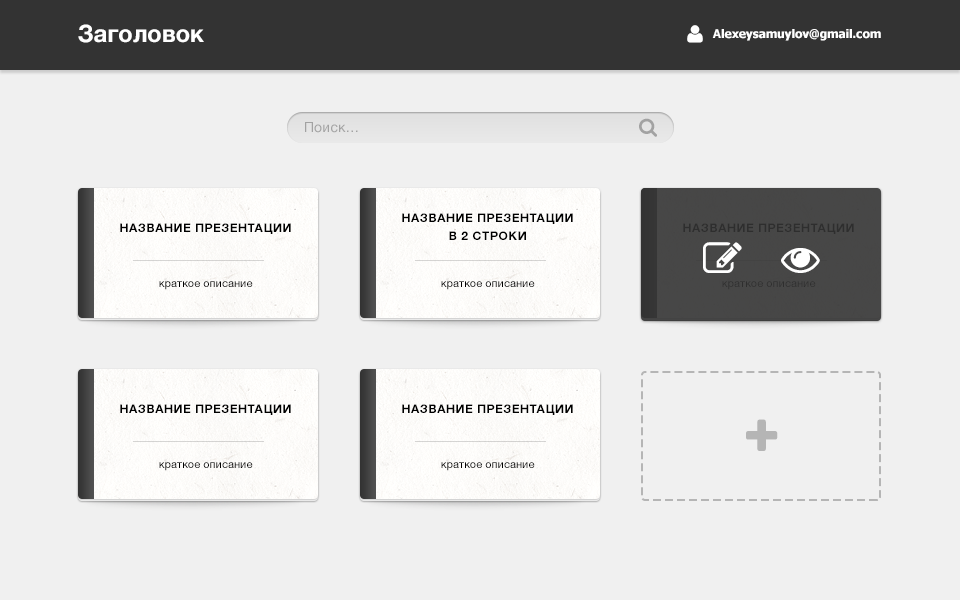
<style>
.page{position:relative;width:960px;height:600px;background:#f0f0f0}
.page>*{position:absolute;margin:0}
.t1{font:24px "HelveticaNeue-Bold";color:#ffffff}
.t2{font:12px "Tahoma-Bold";color:#ffffff}
.t3{font:14px "HelveticaNeue";color:#a2a2a2}
.t4{font:12px/18px "HelveticaNeue-Bold";letter-spacing:0.05em;color:#000000;text-transform:uppercase}
.t5{font:12px "HelveticaNeue-Bold";letter-spacing:0.05em;color:#000000;text-transform:uppercase}
.t6{font:12px "HelveticaNeue-Bold";letter-spacing:0.05em;color:#2e2e2e;text-transform:uppercase}
.t7{font:11px "HelveticaNeue";color:#000000}
.t8{font:11px "HelveticaNeue";color:#2e2e2e}
</style>
<div class="page">
<p class="t1" style="left:78px;top:24px;width:126px;height:19px">Заголовок</p>
<p class="t2" style="left:712px;top:29px;width:169px;height:12px">Alexeysamuylov@gmail.com</p>
<p class="t3" style="left:305px;top:122px;width:53px;height:11px">Поиск…</p>
<p class="t4" style="left:402px;top:213px;width:171px;height:27px;text-align:center">Название презентации<br>в 2 строки</p>
<p class="t5" style="left:120px;top:223px;width:171px;height:11px">Название презентации</p>
<p class="t6" style="left:683px;top:223px;width:171px;height:11px">Название презентации</p>
<p class="t7" style="left:159px;top:281px;width:94px;height:9px">краткое описание</p>
<p class="t7" style="left:441px;top:281px;width:94px;height:9px">краткое описание</p>
<p class="t8" style="left:722px;top:281px;width:94px;height:9px">краткое описание</p>
<p class="t5" style="left:120px;top:404px;width:171px;height:11px">Название презентации</p>
<p class="t5" style="left:402px;top:404px;width:171px;height:11px">Название презентации</p>
<p class="t7" style="left:159px;top:462px;width:94px;height:9px">краткое описание</p>
<p class="t7" style="left:441px;top:462px;width:94px;height:9px">краткое описание</p>
</div>
